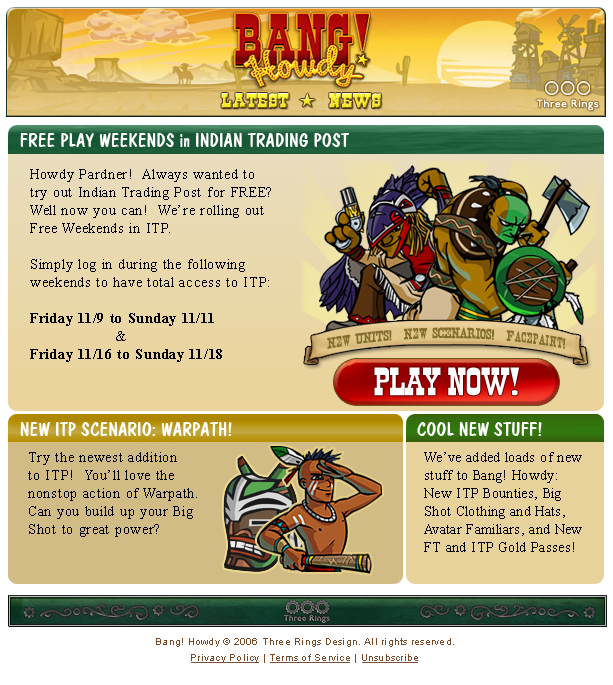
<style>
.page{position:relative;width:613px;height:685px}
.page>*{position:absolute;margin:0}
.t1{font:15.4px "Cowboys";letter-spacing:-0.025em;scale:0.87 1}
.t2{font:11.6px "P22Underground";letter-spacing:0.025em;color:#ffffff}
.t3{font:18px "DomCasual";letter-spacing:0.025em;color:#ffffff}
.t4{font:14px/18px "TimesNewRomanPSMT";letter-spacing:0.05em;color:#000000}
.t5{font:14px/18px "TimesNewRomanPS-BoldMT";letter-spacing:0.05em;color:#000000}
.t6{font:13.3px "Nashville";letter-spacing:0.01em;color:#876d2f;scale:1.15 1}
.t7{font:41.4px "OldTown";letter-spacing:-0.025em;color:#ffffff;scale:1.25 1}
.t8{font:14px/18px "TimesNewRomanPSMT";letter-spacing:0.025em;color:#000000}
.t9{font:10px "ArialMT";letter-spacing:0.025em;color:#774823}
</style>
<div class="page">
<p class="t1" style="left:221px;top:93px;width:160px;height:15px">latest   *    NEWS</p>
<p class="t2" style="left:536px;top:99px;width:63px;height:12px">Three Rings</p>
<p class="t3" style="left:20px;top:133px;width:329px;height:14px">FREE PLAY WEEKENDS in INDIAN TRADING POST</p>
<p class="t4" style="left:30px;top:169px;width:241px;height:193px">Howdy Pardner!  Always wanted to<br>try out Indian Trading Post for FREE?<br>Well now you can!  We’re rolling out <br>Free Weekends in ITP.  <br><br>Simply log in during the following<br>weekends to have total access to ITP:<br><br><span class="t5">Friday 11/9 to Sunday 11/11</span><br>                  &amp;<br><span class="t5">Friday 11/16 to Sunday 11/18</span></p>
<p class="t6" style="left:327px;top:327px;width:239px;height:22px">New UNITS!  New SCENARIOS!  Facepaint!</p>
<p class="t7" style="left:374px;top:367px;width:146px;height:29px">PLAY NOW!</p>
<p class="t3" style="left:20px;top:422px;width:212px;height:14px">NEW ITP SCENARIO: WARPATH!</p>
<p class="t3" style="left:417px;top:422px;width:125px;height:14px">COOL NEW STUFF!</p>
<p class="t4" style="left:28px;top:452px;width:169px;height:85px">Try the newest addition<br>to ITP!  You’ll love the <br>nonstop action of Warpath.<br>Can you build up your Big <br>Shot to great power?</p>
<p class="t8" style="left:424px;top:452px;width:158px;height:100px">We’ve added loads of new<br>stuff to Bang! Howdy:<br>New ITP Bounties, Big<br>Shot Clothing and Hats,<br>Avatar Familiars, and New<br>FT and ITP Gold Passes!</p>
<p class="t9" style="left:156px;top:638px;width:298px;height:9px">Bang! Howdy © 2006 Three Rings Design. All rights reserved.</p>
<p class="t9" style="left:191px;top:654px;width:227px;height:9px">Privacy Policy | Terms of Service | Unsubscribe</p>
</div>
